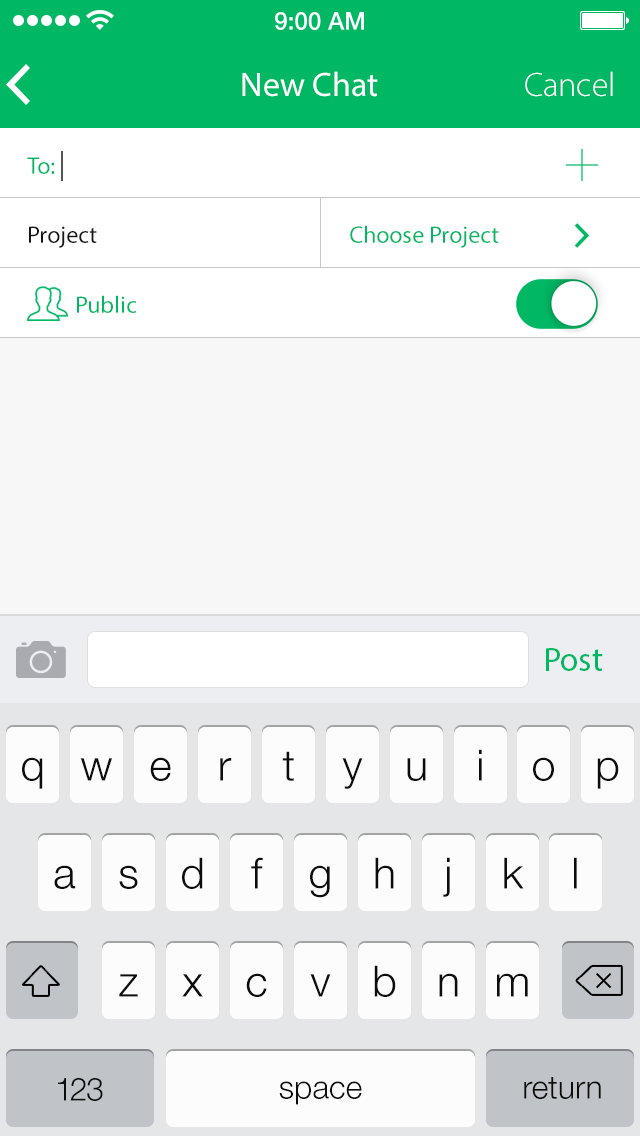
<style>
.page{position:relative;width:640px;height:1136px;background:#f7f7f7}
.page>*{position:absolute;margin:0}
.t1{font:34px "MyriadPro-Regular";color:#ffffff}
.t2{font:34px "MyriadPro-Light";color:#ffffff}
.t3{font:24px "MyriadPro-Regular";color:#00b863}
.t4{font:24px "MyriadPro-Regular";color:#141414}
.t5{font:34px "MyriadPro-Regular";color:#00b863}
.t6{font:43px "HelveticaNeue-Light";letter-spacing:-0.04em;color:#0c0c0c}
.t7{font:32px "HelveticaNeue-Light";letter-spacing:-0.04em;color:#0c0c0c}
.t8{font:32px "HelveticaNeue-Light";letter-spacing:-0.1em;color:#0c0c0c}
.t9{font:32px "HelveticaNeue-Light";color:#0c0c0c}
</style>
<div class="page">
<p class="t1" style="left:242px;top:71px;width:136px;height:26px">New Chat</p>
<p class="t2" style="left:525px;top:71px;width:88px;height:26px">Cancel</p>
<p class="t3" style="left:27px;top:157px;width:28px;height:17px">To:</p>
<p class="t4" style="left:29px;top:226px;width:68px;height:22px">Project</p>
<p class="t3" style="left:350px;top:225px;width:149px;height:23px">Choose Project</p>
<p class="t3" style="left:77px;top:295px;width:60px;height:18px">Public</p>
<p class="t5" style="left:546px;top:648px;width:57px;height:23px">Post</p>
<p class="t6" style="left:479px;top:749px;width:3px;height:32px">i</p>
<p class="t6" style="left:22px;top:757px;width:21px;height:32px">q</p>
<p class="t6" style="left:80px;top:758px;width:32px;height:23px">w</p>
<p class="t6" style="left:150px;top:757px;width:21px;height:24px">e</p>
<p class="t6" style="left:220px;top:758px;width:12px;height:23px">r</p>
<p class="t6" style="left:282px;top:751px;width:12px;height:30px">t</p>
<p class="t6" style="left:342px;top:758px;width:21px;height:31px">y</p>
<p class="t6" style="left:407px;top:758px;width:19px;height:23px">u</p>
<p class="t6" style="left:533px;top:757px;width:21px;height:24px">o</p>
<p class="t6" style="left:597px;top:757px;width:22px;height:32px">p</p>
<p class="t6" style="left:182px;top:857px;width:21px;height:32px">d</p>
<p class="t6" style="left:251px;top:857px;width:12px;height:32px">f</p>
<p class="t6" style="left:375px;top:857px;width:19px;height:32px">h</p>
<p class="t6" style="left:443px;top:857px;width:7px;height:40px">j</p>
<p class="t6" style="left:504px;top:857px;width:20px;height:32px">k</p>
<p class="t6" style="left:574px;top:857px;width:3px;height:32px">l</p>
<p class="t6" style="left:54px;top:865px;width:22px;height:24px">a</p>
<p class="t6" style="left:119px;top:865px;width:19px;height:24px">s</p>
<p class="t6" style="left:310px;top:865px;width:20px;height:33px">g</p>
<p class="t6" style="left:374px;top:965px;width:22px;height:32px">b</p>
<p class="t6" style="left:119px;top:974px;width:19px;height:23px">z</p>
<p class="t6" style="left:182px;top:974px;width:21px;height:23px">x</p>
<p class="t6" style="left:246px;top:973px;width:21px;height:24px">c</p>
<p class="t6" style="left:310px;top:974px;width:21px;height:23px">v</p>
<p class="t6" style="left:439px;top:973px;width:19px;height:24px">n</p>
<p class="t6" style="left:497px;top:973px;width:31px;height:24px">m</p>
<p class="t7" style="left:58px;top:1078px;width:45px;height:23px"><span class="t8">1</span>23</p>
<p class="t9" style="left:279px;top:1081px;width:83px;height:24px">space</p>
<p class="t9" style="left:524px;top:1077px;width:77px;height:22px">return</p>
</div>
